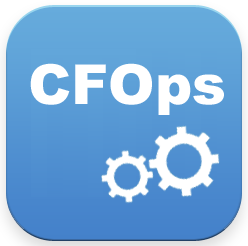
<style>
.page{position:relative;width:248px;height:246px}
.page>*{position:absolute;margin:0}
.t1{font:55.3px "Arial-Black";color:#ffffff}
</style>
<div class="page">
<p class="t1" style="left:30px;top:63px;width:194px;height:52px">CFOps</p>
</div>
